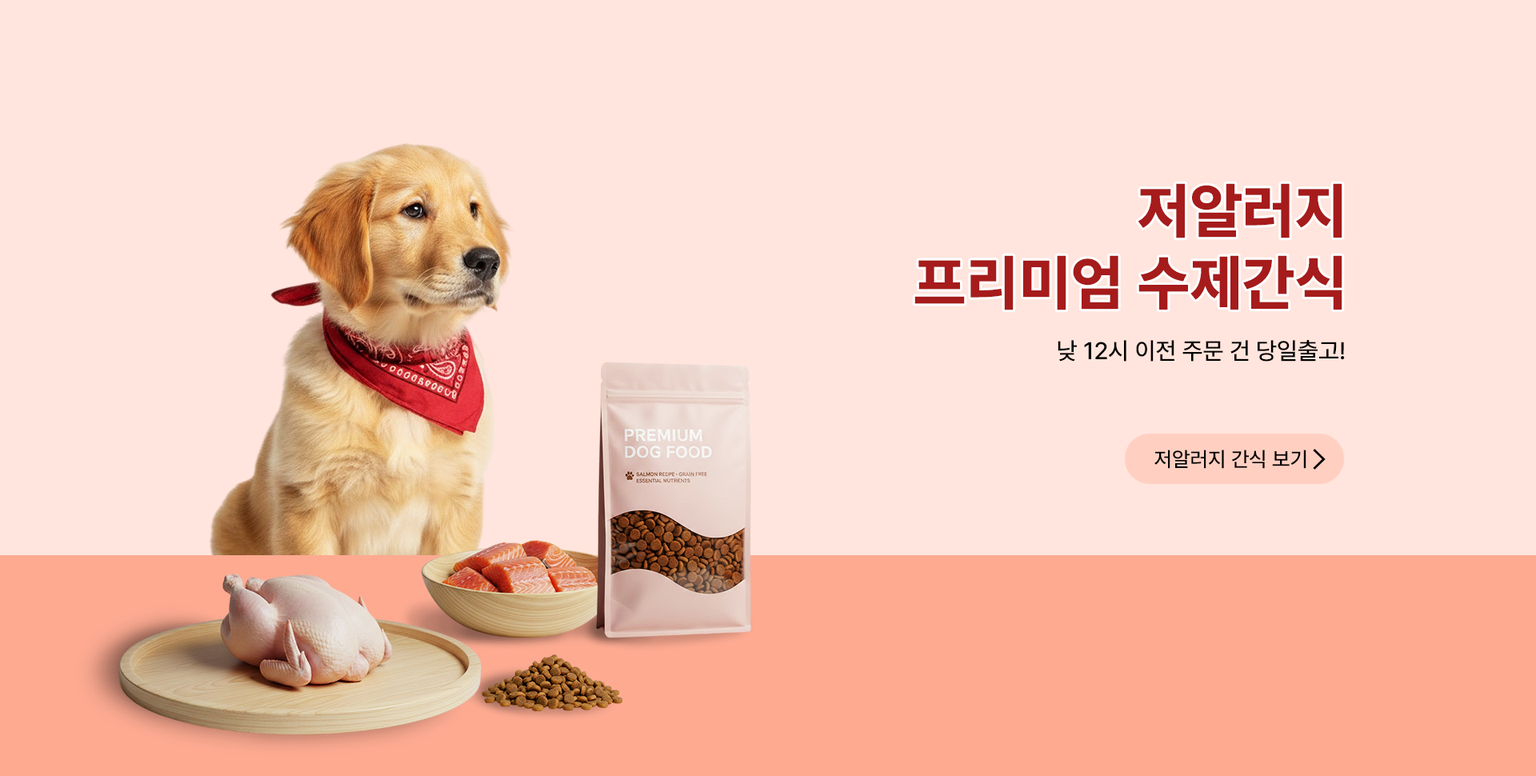
<style>
.page{position:relative;width:1536px;height:776px;background:#ffe5dd}
.page>*{position:absolute;margin:0}
.t1{font:60px "Pretendard-ExtraBold";letter-spacing:0.01em;color:#a61b1b;text-transform:uppercase}
.t2{font:24px "Pretendard-Medium";color:#000000;text-transform:uppercase}
.t3{font:20.8px "Pretendard-Medium";color:#000000;text-transform:uppercase}
</style>
<div class="page">
<p class="t1" style="left:915px;top:183px;width:428px;height:127px;text-align:right">저알러지<br>프리미엄 수제간식</p>
<p class="t2" style="left:1058px;top:340px;width:287px;height:22px">낮 12시 이전 주문 건 당일출고!</p>
<p class="t3" style="left:1155px;top:450px;width:152px;height:19px">저알러지 간식 보기</p>
</div>
